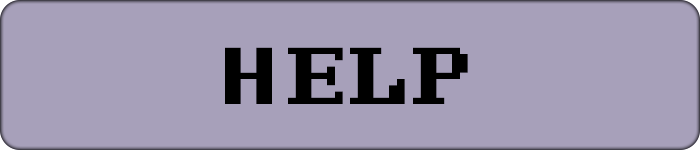
<style>
.page{position:relative;width:700px;height:150px;background:#a7a0ba}
.page>*{position:absolute;margin:0}
.t1{font:100px "Terminal";color:#000000}
</style>
<div class="page">
<p class="t1" style="left:225px;top:47px;width:243px;height:57px">HELP</p>
</div>
